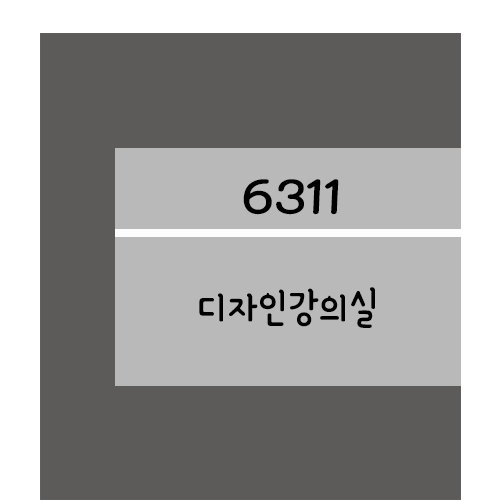
<style>
.page{position:relative;width:500px;height:500px;background:#5d5a5a}
.page>*{position:absolute;margin:0}
.t1{font:61.2px "YanoljaYacheR";color:#000000;scale:1.18 1}
.t2{font:48px "YanoljaYacheR";color:#000000}
</style>
<div class="page">
<p class="t1" style="left:243px;top:179px;width:96px;height:36px">6311</p>
<p class="t2" style="left:199px;top:287px;width:176px;height:41px">디자인강의실</p>
</div>
